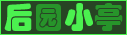
<style>
.page{position:relative;width:127px;height:35px;background:#274424}
.page>*{position:absolute;margin:0}
.t1{font:30px "STHupo";color:#4bf14f}
.t2{font:30px "STHupo";color:#27942a}
</style>
<div class="page">
<p class="t1" style="left:4px;top:3px;width:119px;height:28px">后<span class="t2">园</span>小<span class="t2">亭</span></p>
</div>
